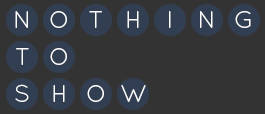
<style>
.page{position:relative;width:265px;height:114px;background:#333333}
.page>*{position:absolute;margin:0}
.t1{font:24px "Quicksand-Regular";letter-spacing:-0.14em;color:#ffffff}
</style>
<div class="page">
<p class="t1" style="left:15px;top:11px;width:13px;height:17px">N</p>
<p class="t1" style="left:50px;top:11px;width:17px;height:17px">O</p>
<p class="t1" style="left:89px;top:11px;width:13px;height:17px">T</p>
<p class="t1" style="left:127px;top:11px;width:12px;height:17px">H</p>
<p class="t1" style="left:169px;top:11px;width:2px;height:17px">I</p>
<p class="t1" style="left:200px;top:11px;width:13px;height:17px">N</p>
<p class="t1" style="left:235px;top:11px;width:16px;height:17px">G</p>
<p class="t1" style="left:16px;top:48px;width:13px;height:17px">T</p>
<p class="t1" style="left:50px;top:48px;width:17px;height:17px">O</p>
<p class="t1" style="left:15px;top:84px;width:14px;height:18px">S</p>
<p class="t1" style="left:53px;top:85px;width:12px;height:17px">H</p>
<p class="t1" style="left:87px;top:85px;width:17px;height:17px">O</p>
<p class="t1" style="left:121px;top:85px;width:25px;height:17px">W</p>
</div>
